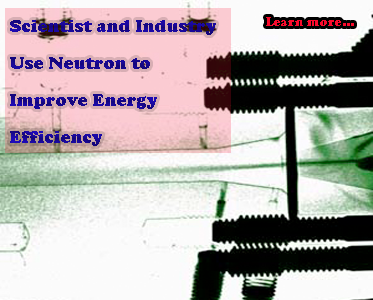
<style>
.page{position:relative;width:373px;height:300px}
.page>*{position:absolute;margin:0}
.t1{font:13px "CooperBlack";color:#fa0a2c}
.t2{font:18px/37px "CooperBlack";color:#180793}
</style>
<div class="page">
<p class="t1" style="left:266px;top:17px;width:88px;height:9px">Learn more...</p>
<p class="t2" style="left:10px;top:20px;width:206px;height:126px">Scientist and Industry<br>Use Neutron to <br>Improve Energy<br>Efficiency</p>
</div>
